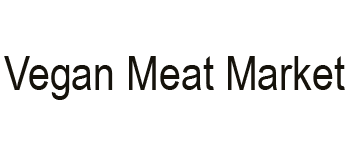
<style>
.page{position:relative;width:350px;height:150px;background:#ffffff}
.page>*{position:absolute;margin:0}
.t1{font:48px "ArialNarrow";color:#15120b}
</style>
<div class="page">
<p class="t1" style="left:4px;top:56px;width:341px;height:44px">Vegan Meat Market</p>
</div>
